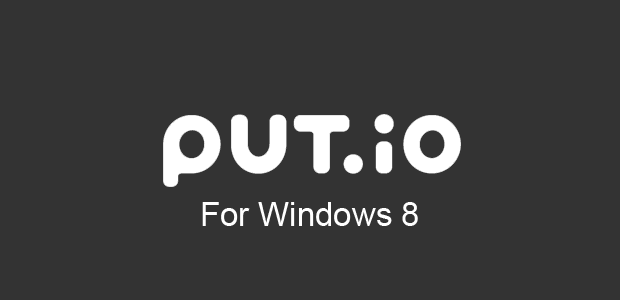
<style>
.page{position:relative;width:620px;height:300px;background:#333333}
.page>*{position:absolute;margin:0}
.t1{font:33px "ArialMT";color:#ffffff}
</style>
<div class="page">
<p class="t1" style="left:202px;top:202px;width:216px;height:24px">For Windows 8</p>
</div>
